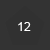
<style>
.page{position:relative;width:50px;height:50px;background:#333333}
.page>*{position:absolute;margin:0}
.t1{font:12px "ArialMT";color:#ffffff}
</style>
<div class="page">
<p class="t1" style="left:18px;top:22px;width:13px;height:9px">12</p>
</div>
